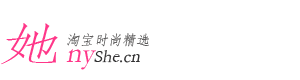
<style>
.page{position:relative;width:300px;height:80px;background:#ffffff}
.page>*{position:absolute;margin:0}
.t1{font:45px "STFangsong";color:#ff3789;font-style:italic;scale:1.46 1}
.t2{font:14px "STFangsong";color:#605f5f;font-style:italic}
.t3{font:18px "STFangsong";color:#302f30;font-style:italic}
.t4{font:30px "STFangsong";color:#ff3789;font-style:italic}
</style>
<div class="page">
<p class="t1" style="left:1px;top:23px;width:57px;height:42px">她</p>
<p class="t2" style="left:67px;top:33px;width:82px;height:14px">淘宝时尚精选</p>
<p class="t3" style="left:66px;top:49px;width:74px;height:21px"><span class="t4">ny</span>She.cn</p>
</div>
